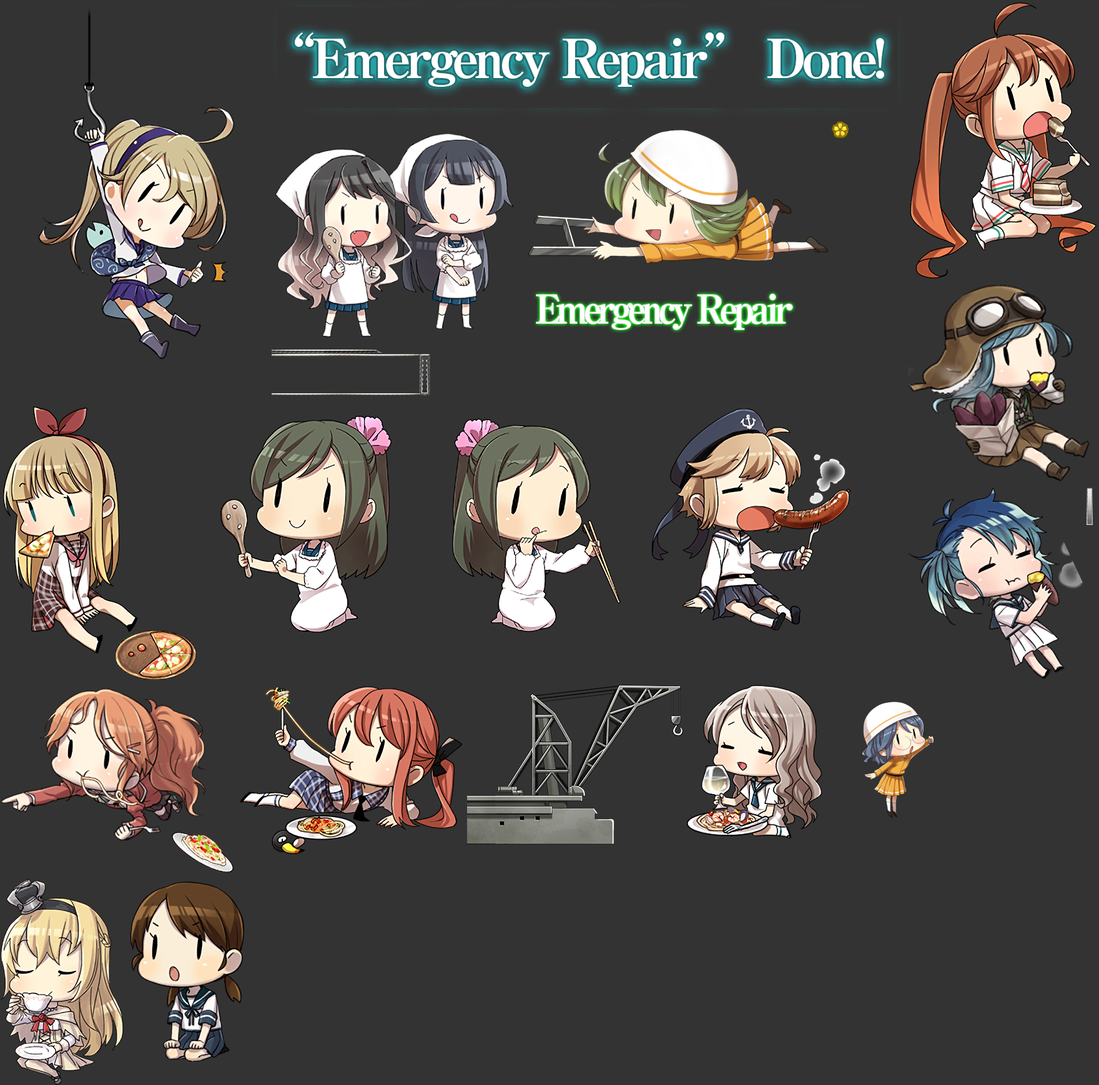
<style>
.page{position:relative;width:1099px;height:1085px;background:#333333}
.page>*{position:absolute;margin:0}
.t1{font:53.7px "RyuminPro-ExBold";letter-spacing:-0.08em;color:#ffffff}
.t2{font:39.3px "RyuminPro-ExBold";letter-spacing:-0.12em;color:#ffffff;scale:0.96 1}
</style>
<div class="page">
<p class="t1" style="left:295px;top:32px;width:589px;height:55px">“Emergency Repair” Done!</p>
<p class="t2" style="left:536px;top:294px;width:256px;height:36px">Emergency Repair</p>
</div>
